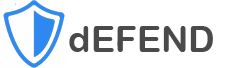
<style>
.page{position:relative;width:232px;height:68px;background:#ffffff}
.page>*{position:absolute;margin:0}
.t1{font:36px "ArialRoundedMTBold";color:#4a4a4a}
</style>
<div class="page">
<p class="t1" style="left:69px;top:26px;width:144px;height:26px">dEFEND</p>
</div>
